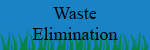
<style>
.page{position:relative;width:150px;height:50px;background:#1883c5}
.page>*{position:absolute;margin:0}
.t1{font:18px "TimesNewRomanPSMT";color:#000000}
</style>
<div class="page">
<p class="t1" style="left:32px;top:7px;width:86px;height:33px;text-align:center">Waste <br>Elimination</p>
</div>
